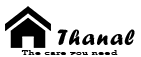
<style>
.page{position:relative;width:141px;height:57px;background:#ffffff}
.page>*{position:absolute;margin:0}
.t1{font:22.9px "ForteMT";letter-spacing:0.08em;color:#000000}
.t2{font:6.5px "Rockwell";letter-spacing:0.08em;color:#000000;scale:1.5 1}
</style>
<div class="page">
<p class="t1" style="left:57px;top:29px;width:78px;height:16px">Thanal</p>
<p class="t2" style="left:21px;top:50px;width:97px;height:5px">The care you need</p>
</div>
